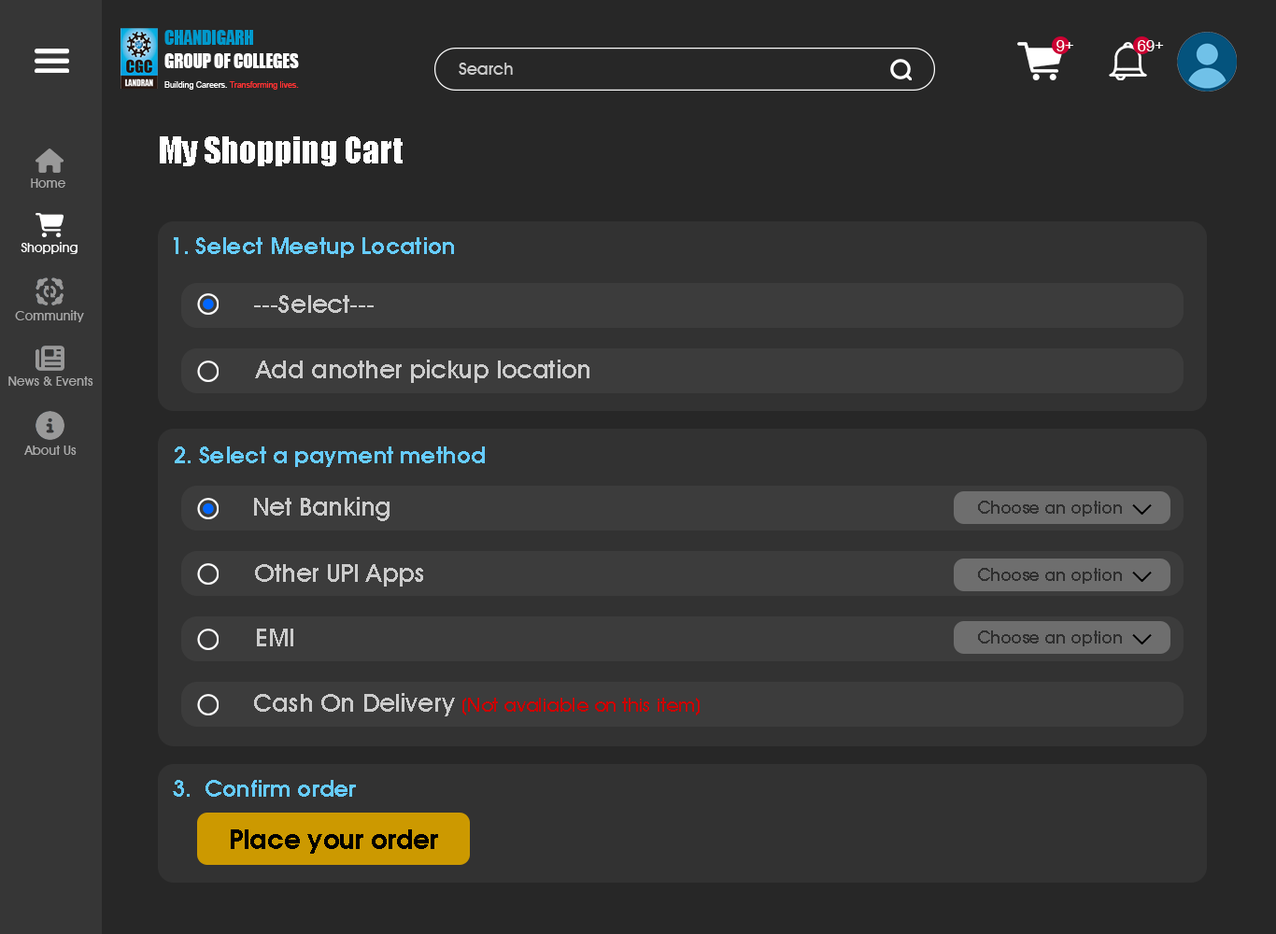
<style>
.page{position:relative;width:1276px;height:934px;background:#272727}
.page>*{position:absolute;margin:0}
.t1{font:18.9px "Impact";color:#ffffff;scale:0.92 1}
.t2{font:18.9px "Impact";color:#0099cc;scale:0.92 1}
.t3{font:15.5px "ArialMT";color:#ffffff}
.t4{font:17.2px "AvantGardeITCbyBT-Medium";color:#cccccc}
.t5{font:8.9px "ArialMT";color:#ff3333;scale:0.92 1}
.t6{font:8.9px "ArialMT";color:#ffffff;scale:0.92 1}
.t7{font:34.4px "Impact";color:#ffffff}
.t8{font:13.1px "AvantGardeITCbyBT-Medium";color:#acacac}
.t9{font:13.1px "AvantGardeITCbyBT-Medium";color:#ffffff}
.t10{font:22.7px "AvalonBold";color:#66ccff}
.t11{font:25.4px "AvantGardeITCbyBT-Medium";color:#cccccc}
.t12{font:17.7px "AvantGardeITCbyBT-Medium";color:#2f2f2f}
.t13{font:19.6px "AvantGardeITCbyBT-Medium";color:#cc0000}
.t14{font:26.1px "AvalonBold";color:#000000}
</style>
<div class="page">
<p class="t1" style="left:164px;top:30px;width:135px;height:38px"><span class="t2">CHANDIGARH<br></span>GROUP OF COLLEGES</p>
<p class="t3" style="left:1057px;top:40px;width:17px;height:11px">9+</p>
<p class="t3" style="left:1138px;top:40px;width:26px;height:11px">69+</p>
<p class="t4" style="left:459px;top:63px;width:54px;height:12px">Search</p>
<p class="t5" style="left:164px;top:81px;width:135px;height:9px"><span class="t6">Building Careers. </span>Transforming lives.</p>
<p class="t7" style="left:160px;top:136px;width:243px;height:30px">My Shopping Cart</p>
<p class="t8" style="left:31px;top:178px;width:34px;height:10px">Home</p>
<p class="t9" style="left:21px;top:242px;width:57px;height:12px">Shopping</p>
<p class="t10" style="left:174px;top:237px;width:280px;height:21px">1. Select Meetup Location</p>
<p class="t11" style="left:254px;top:295px;width:120px;height:18px">---Select---</p>
<p class="t8" style="left:15px;top:310px;width:69px;height:12px">Community</p>
<p class="t11" style="left:255px;top:360px;width:335px;height:23px">Add another pickup location</p>
<p class="t8" style="left:8px;top:377px;width:85px;height:9px">News &amp; Events</p>
<p class="t8" style="left:24px;top:446px;width:53px;height:9px">About Us</p>
<p class="t10" style="left:175px;top:447px;width:310px;height:20px">2. Select a payment method</p>
<p class="t11" style="left:254px;top:497px;width:136px;height:24px">Net Banking</p>
<p class="t12" style="left:978px;top:501px;width:144px;height:16px">Choose an option</p>
<p class="t11" style="left:255px;top:564px;width:168px;height:23px">Other UPI Apps</p>
<p class="t12" style="left:978px;top:568px;width:144px;height:16px">Choose an option</p>
<p class="t11" style="left:257px;top:629px;width:36px;height:18px">EMI</p>
<p class="t12" style="left:978px;top:631px;width:144px;height:16px">Choose an option</p>
<p class="t13" style="left:254px;top:693px;width:446px;height:24px"><span class="t11">Cash On Delivery </span>(Not avaliable on this item)</p>
<p class="t10" style="left:173px;top:780px;width:183px;height:17px">3.  Confirm order</p>
<p class="t14" style="left:231px;top:830px;width:207px;height:24px">Place your order</p>
</div>
